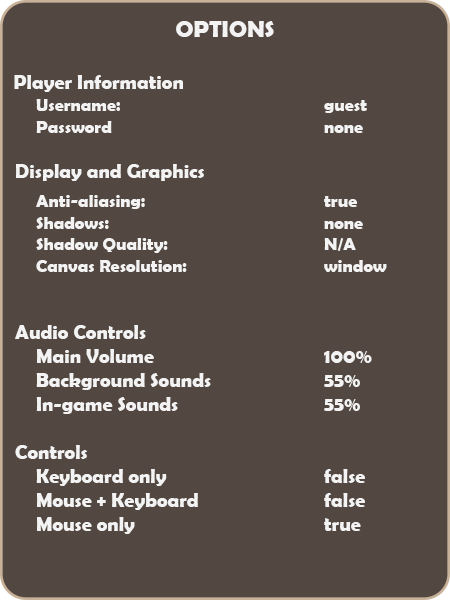
<style>
.page{position:relative;width:450px;height:600px;background:#534741}
.page>*{position:absolute;margin:0}
.t1{font:20px "BerlinSansFBDemi-Bold";color:#f3f3f3}
.t2{font:11px "ArialMT";color:#c3c3c3}
.t3{font:24px "BerlinSansFBDemi-Bold";color:#f3f3f3}
.t4{font:18px "BerlinSansFBDemi-Bold";color:#f3f3f3}
</style>
<div class="page">
<p class="t1" style="left:14px;top:21px;width:373px;height:513px;text-align:center"><span class="t2"><br></span><span class="t3">OPTIONS<br><br>   </span>Player Information<br><span class="t4"> Username:      guest<br> Password      none<br><br></span>   Display and Graphics<br> <span class="t4">Anti-aliasing:     true<br> Shadows:      none<br> Shadow Quality:     N/A<br> Canvas Resolution:    window<br><br><br></span>   Audio Controls<br> Main Volume     100%<br> Background Sounds    55%<br> In-game Sounds     55%<br><br>   Controls<br> Keyboard only     false<br> Mouse + Keyboard    false<br> Mouse only      true</p>
</div>
